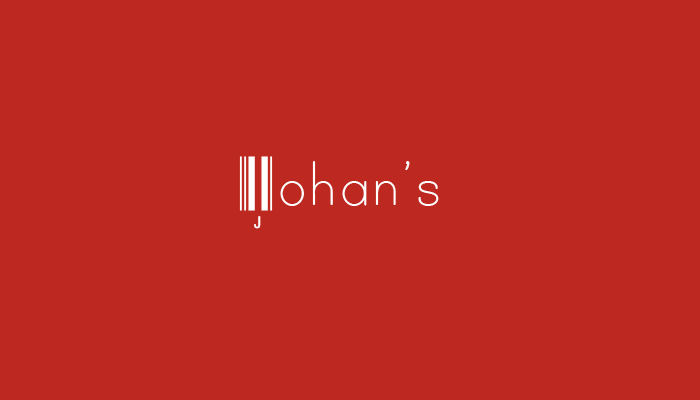
<style>
.page{position:relative;width:700px;height:400px;background:#bd2920}
.page>*{position:absolute;margin:0}
.t1{font:72px "C39HrP36DlTt";color:#ffffff}
.t2{font:72px "PrintClearly";color:#ffffff}
</style>
<div class="page">
<p class="t1" style="left:239px;top:156px;width:34px;height:73px">J</p>
<p class="t2" style="left:280px;top:161px;width:159px;height:45px">ohan’s</p>
</div>
